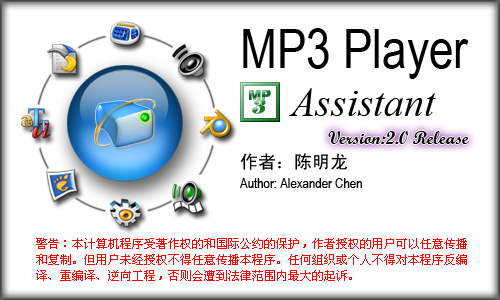
<style>
.page{position:relative;width:500px;height:300px;background:#ffffff}
.page>*{position:absolute;margin:0}
.t1{font:53.8px "ArialNarrow";color:#000000}
.t2{font:40px "TimesNewRomanPS-ItalicMT";color:#000000}
.t3{font:18px "ScriptMTBold";color:#000000}
.t4{font:18px "SimHei";color:#000000}
.t5{font:14px "ArialNarrow";color:#000000}
.t6{font:12px/16px "SimSun";color:#ff0000}
</style>
<div class="page">
<p class="t1" style="left:243px;top:28px;width:226px;height:51px">MP3 Player</p>
<p class="t2" style="left:289px;top:88px;width:147px;height:28px">Assistant</p>
<p class="t3" style="left:328px;top:131px;width:141px;height:13px">Version:2.0 Release</p>
<p class="t4" style="left:240px;top:153px;width:107px;height:17px">作者：陈明龙</p>
<p class="t5" style="left:240px;top:178px;width:122px;height:10px">Author: Alexander Chen</p>
<p class="t6" style="left:36px;top:238px;width:431px;height:43px">警告：本计算机程序受著作权的和国际公约的保护，作者授权的用户可以任意传播<br>和复制。但用户未经授权不得任意传播本程序。任何组织或个人不得对本程序反编<br>译、重编译、逆向工程，否则会遭到法律范围内最大的起诉。</p>
</div>
